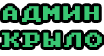
<style>
.page{position:relative;width:104px;height:56px;background:#ffffff}
.page>*{position:absolute;margin:0}
.t1{font:15.7px "PxPlus_IBM_BIOS";letter-spacing:0.075em;color:#39c773;scale:1.19 1}
.t2{font:16.3px "PxPlus_IBM_BIOS";letter-spacing:0.075em;color:#39c773;scale:1.19 1}
</style>
<div class="page">
<p class="t1" style="left:3px;top:6px;width:96px;height:16px">АДМИН</p>
<p class="t2" style="left:2px;top:32px;width:100px;height:15px">КРЫЛО</p>
</div>
